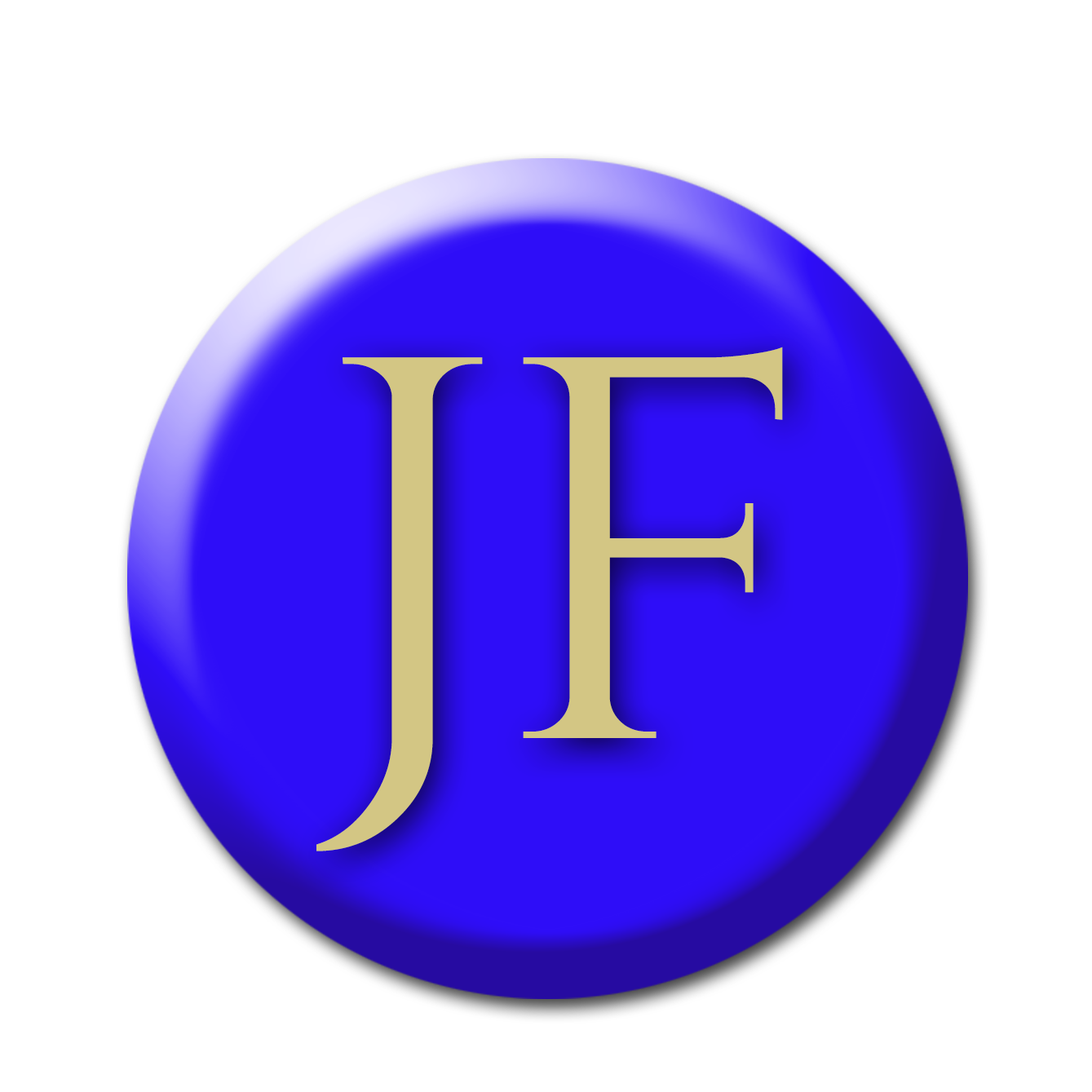
<style>
.page{position:relative;width:1092px;height:1092px;background:#ffffff}
.page>*{position:absolute;margin:0}
.t1{font:634.3px "Cinzel-Regular";letter-spacing:-0.025em;color:#d3c684}
</style>
<div class="page">
<p class="t1" style="left:316px;top:347px;width:467px;height:504px">jf</p>
</div>
